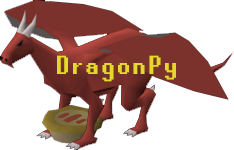
<style>
.page{position:relative;width:234px;height:150px;background:#ffffff}
.page>*{position:absolute;margin:0}
.t1{font:29.1px "RuneScape-UF";letter-spacing:0.1em;color:#e4d928}
</style>
<div class="page">
<p class="t1" style="left:57px;top:55px;width:119px;height:27px">DragonPy</p>
</div>
